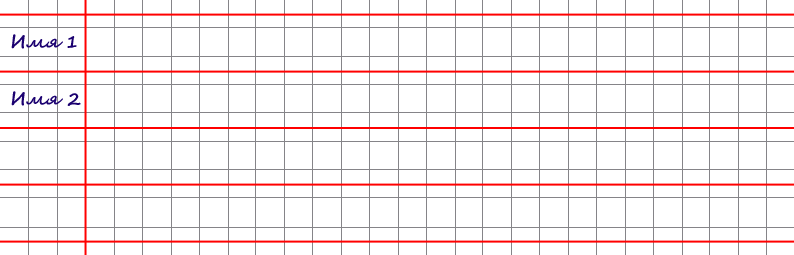
<style>
.page{position:relative;width:794px;height:255px;background:#ffffff}
.page>*{position:absolute;margin:0}
.t1{font:18px "SegoeScript-Bold";color:#1b0170}
</style>
<div class="page">
<p class="t1" style="left:11px;top:34px;width:66px;height:15px">Имя 1</p>
<p class="t1" style="left:11px;top:91px;width:70px;height:15px">Имя 2</p>
</div>
